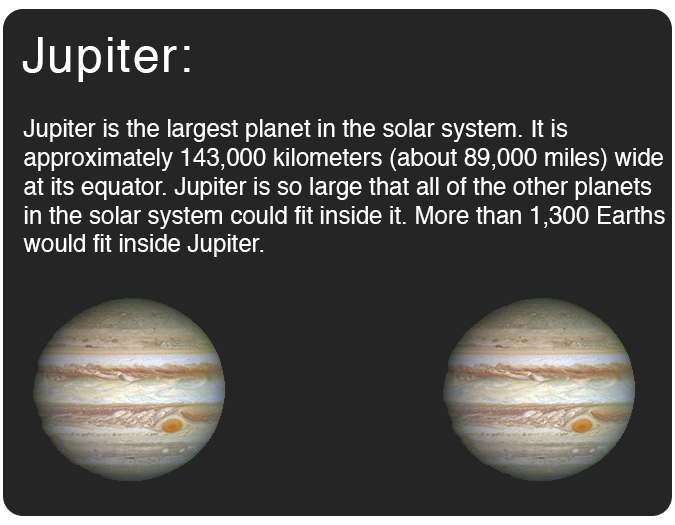
<style>
.page{position:relative;width:675px;height:525px;background:#252525}
.page>*{position:absolute;margin:0}
.t1{font:48px "Helvetica";letter-spacing:0.04em;color:#ffffff}
.t2{font:24px "Helvetica";color:#ffffff}
</style>
<div class="page">
<p class="t1" style="left:22px;top:37px;width:168px;height:45px">Jupiter:</p>
<p class="t2" style="left:23px;top:119px;width:642px;height:138px">Jupiter is the largest planet in the solar system. It is <br>approximately 143,000 kilometers (about 89,000 miles) wide<br>at its equator. Jupiter is so large that all of the other planets <br>in the solar system could fit inside it. More than 1,300 Earths<br>would fit inside Jupiter.</p>
</div>
